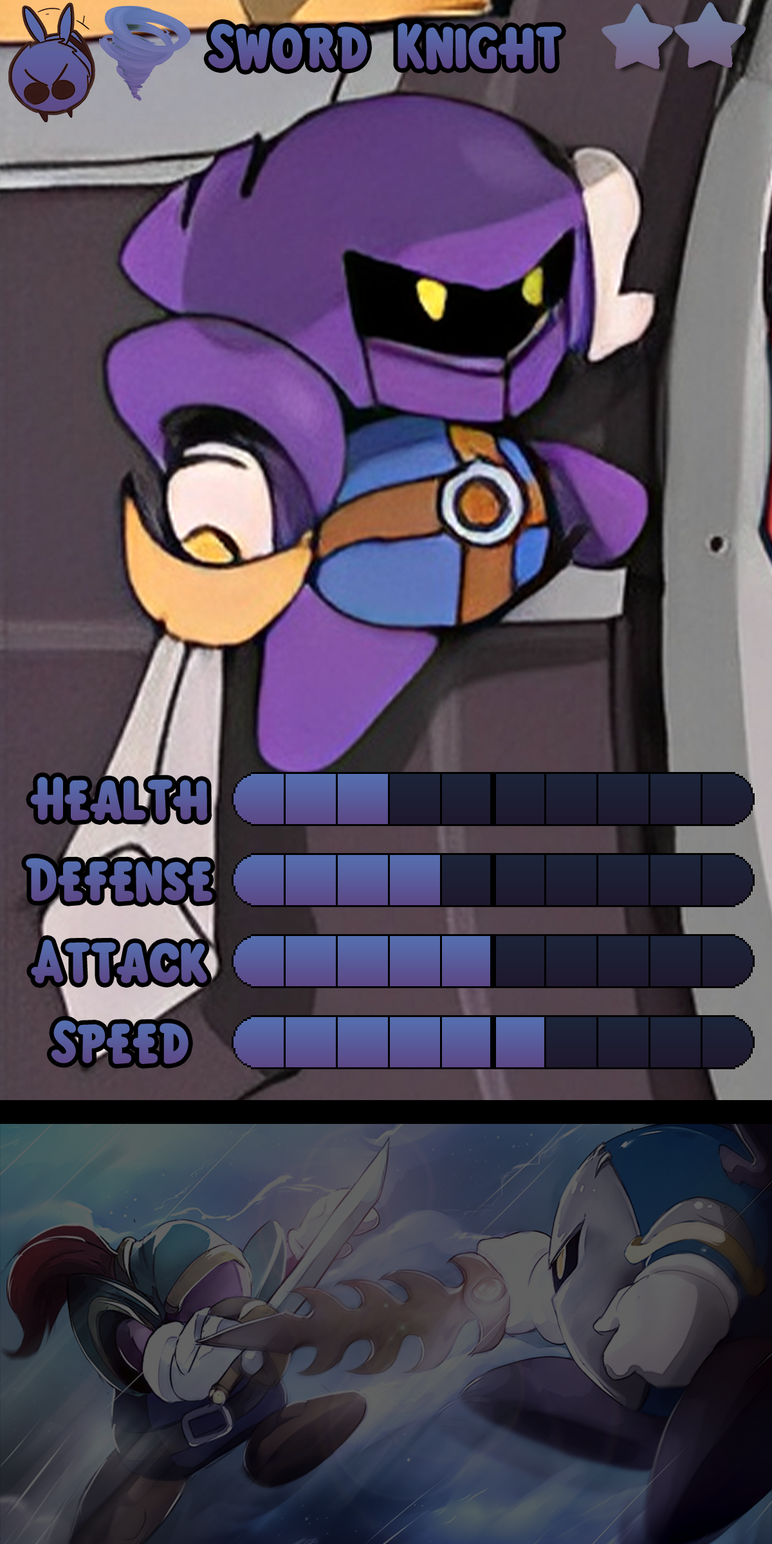
<style>
.page{position:relative;width:772px;height:1544px}
.page>*{position:absolute;margin:0}
.t1{font:96.5px "KirbyClassic";color:#595a9a}
.t2{font:92.7px "KirbyClassic";color:#595a9a}
.t3{font:92.7px "KirbyClassic";color:#595b9b}
.t4{font:92.7px "KirbyClassic";color:#585c9c}
</style>
<div class="page">
<p class="t1" style="left:208px;top:23px;width:354px;height:47px">Sword Knight</p>
<p class="t2" style="left:30px;top:777px;width:178px;height:44px">Health</p>
<p class="t3" style="left:26px;top:858px;width:186px;height:45px">Defense</p>
<p class="t2" style="left:31px;top:939px;width:176px;height:45px">Attack</p>
<p class="t4" style="left:51px;top:1021px;width:138px;height:43px">Speed</p>
</div>
